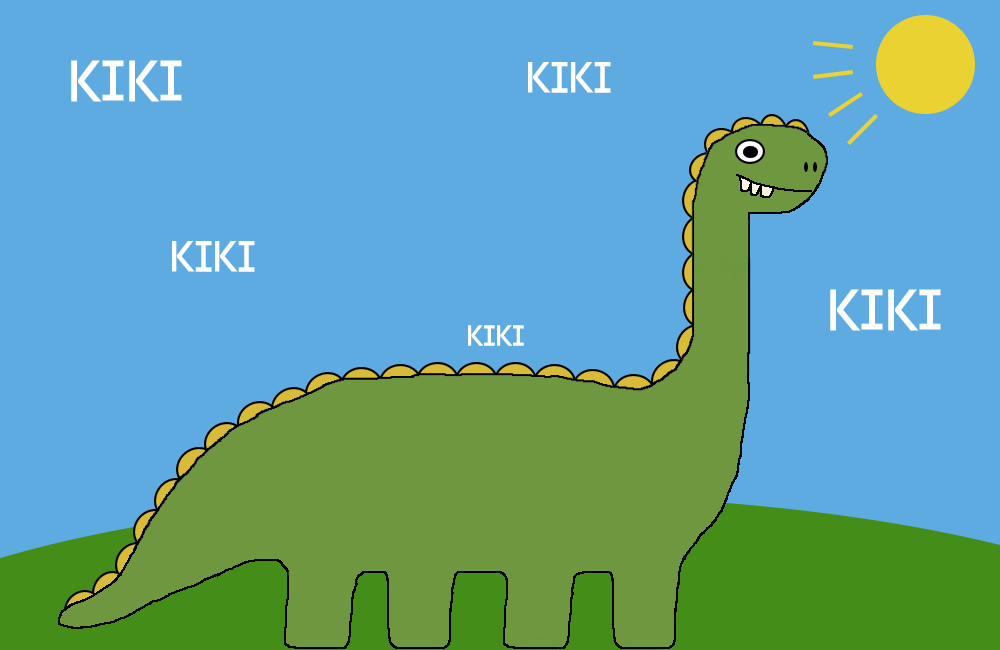
<style>
.page{position:relative;width:1000px;height:650px;background:#5eabe1}
.page>*{position:absolute;margin:0}
.t1{font:100px "Code-Pro-Demo";color:#ffffff}
.t2{font:75px "Code-Pro-Demo";color:#ffffff}
.t3{font:50px "Code-Pro-Demo";color:#ffffff}
</style>
<div class="page">
<p class="t1" style="left:71px;top:60px;width:111px;height:42px">KIKI</p>
<p class="t2" style="left:528px;top:62px;width:83px;height:31px">KIKI</p>
<p class="t2" style="left:172px;top:241px;width:83px;height:31px">KIKI</p>
<p class="t1" style="left:830px;top:289px;width:111px;height:42px">KIKI</p>
<p class="t3" style="left:468px;top:325px;width:56px;height:21px">KIKI</p>
</div>
